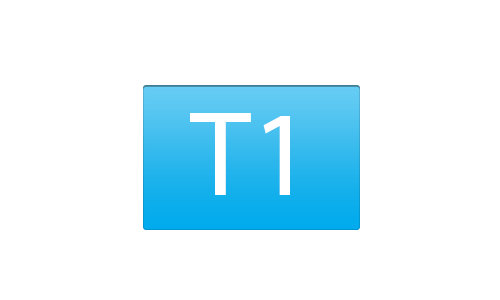
<style>
.page{position:relative;width:500px;height:300px;background:#ffffff}
.page>*{position:absolute;margin:0}
.t1{font:121.9px "MyriadPro-Regular";color:#ffffff}
</style>
<div class="page">
<p class="t1" style="left:190px;top:113px;width:100px;height:82px">T1</p>
</div>
